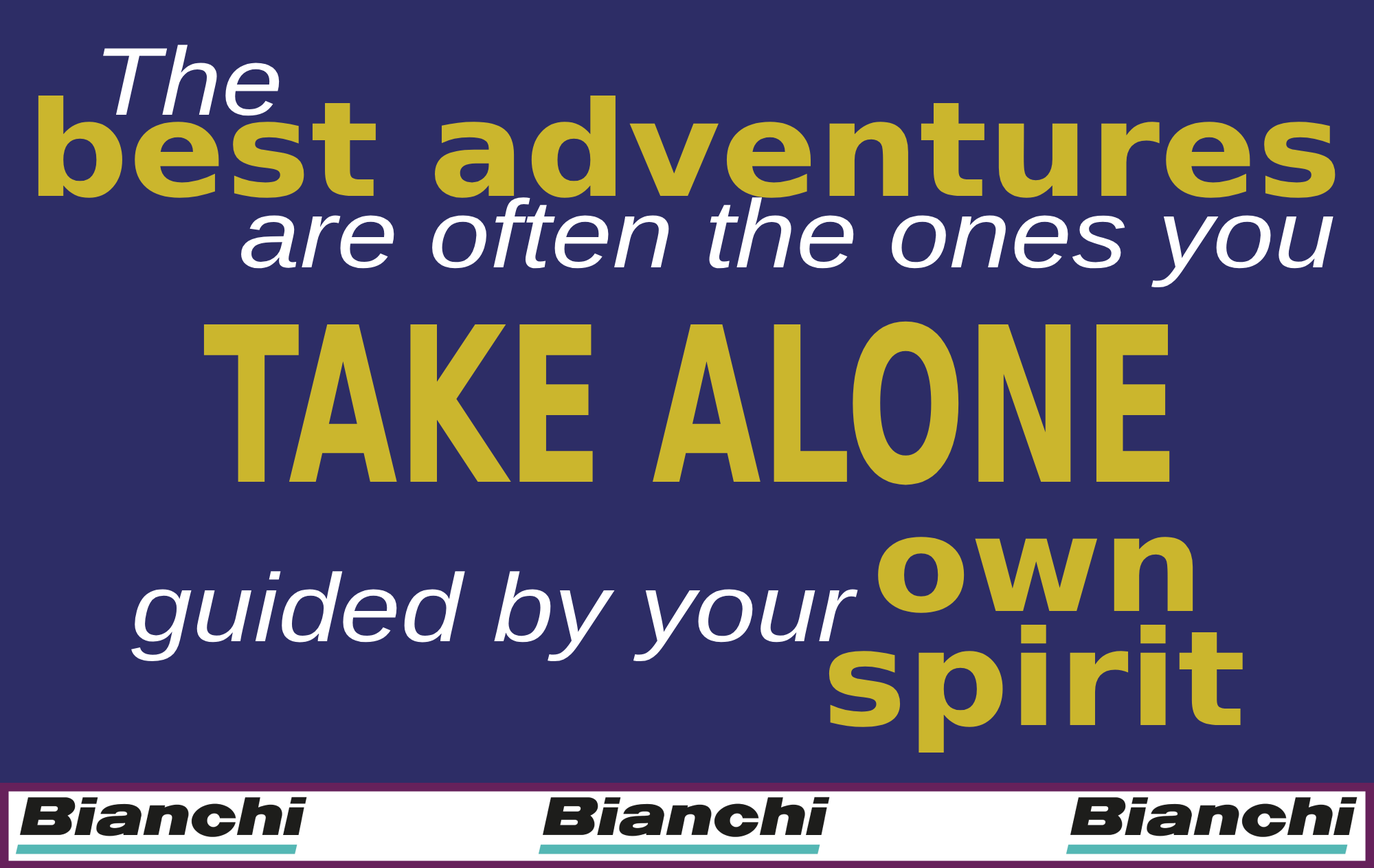
<style>
.page{position:relative;width:1374px;height:868px;background:#2d2d66}
.page>*{position:absolute;margin:0}
.t1{font:96.4px "Arial-ItalicMT";color:#ffffff;scale:1.14 1}
.t2{font:132.1px "Arial-Black";color:#cbb62d;scale:1.08 1}
.t3{font:215.8px "Arial-Black";color:#cbb62d;scale:0.65 1}
</style>
<div class="page">
<p class="t1" style="left:103px;top:45px;width:177px;height:71px">The</p>
<p class="t2" style="left:38px;top:95px;width:1298px;height:103px">best adventures</p>
<p class="t1" style="left:241px;top:197px;width:1093px;height:91px">are often the ones you</p>
<p class="t3" style="left:203px;top:321px;width:967px;height:164px">TAKE ALONE</p>
<p class="t2" style="left:878px;top:537px;width:315px;height:76px">own</p>
<p class="t1" style="left:131px;top:571px;width:727px;height:91px">guided by your</p>
<p class="t2" style="left:829px;top:624px;width:414px;height:128px">spirit</p>
</div>
